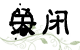
<style>
.page{position:relative;width:80px;height:50px;background:#ffffff}
.page>*{position:absolute;margin:0}
.t1{font:36px "-Light";letter-spacing:0.075em;color:#000000;font-weight:bold;scale:0.83 1}
</style>
<div class="page">
<p class="t1" style="left:9px;top:3px;width:60px;height:37px">关闭daochu</p>
</div>
